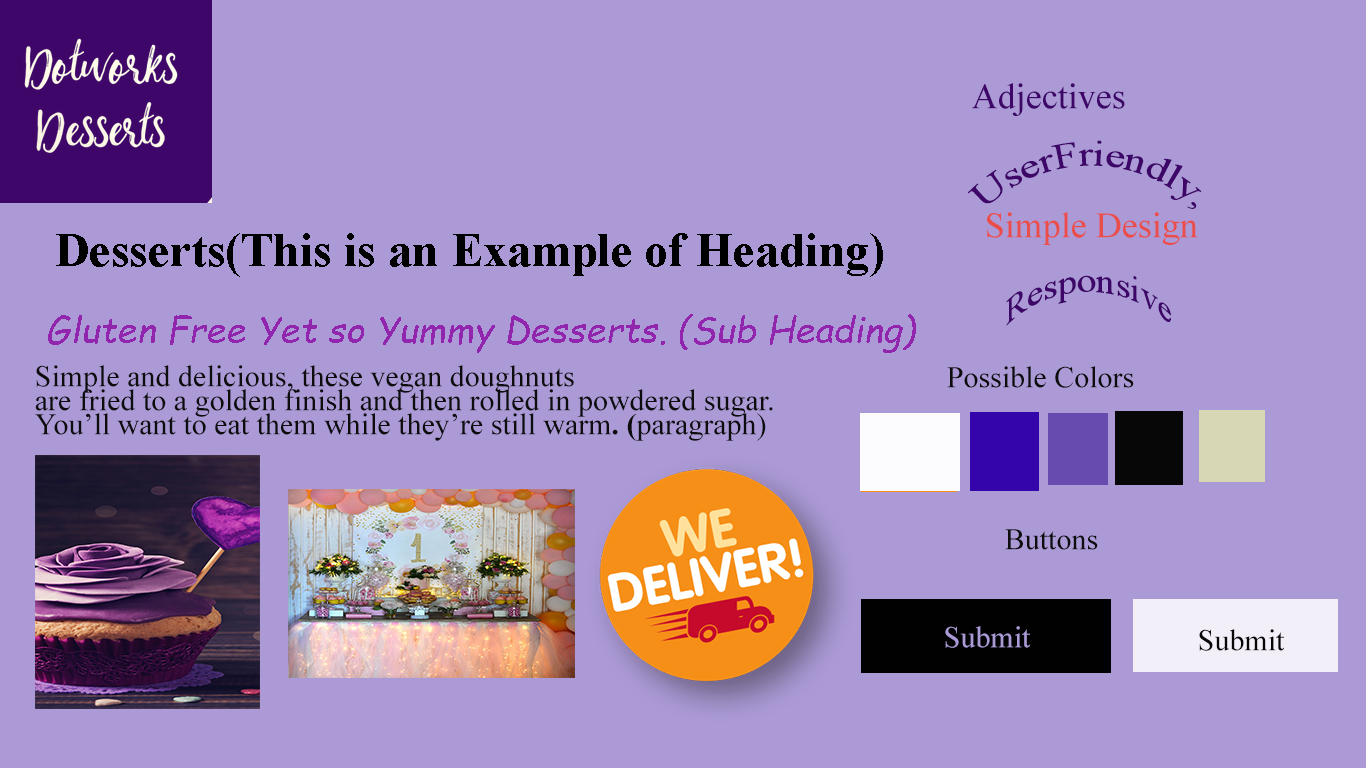
<style>
.page{position:relative;width:1366px;height:768px;background:#ab9ad6}
.page>*{position:absolute;margin:0}
.t1{font:36px "TimesNewRomanPSMT";color:#3e0668}
.t2{font:36px/24px "TimesNewRomanPSMT";color:#3e0668}
.t3{font:36px "TimesNewRomanPSMT";color:#ea4e4a}
.t4{font:48px "TimesNewRomanPS-BoldMT";color:#000000}
.t5{font:36px "ComicSansMS-Italic";color:#9225ad}
.t6{font:30px/24px "TimesNewRomanPSMT";color:#0e0d0e}
.t7{font:30px/24px "TimesNewRomanPS-BoldMT";color:#0e0d0e}
.t8{font:30px "TimesNewRomanPSMT";color:#0e0d0e}
.t9{font:30px "TimesNewRomanPSMT";color:#ab9ad6}
.t10{font:30px "TimesNewRomanPSMT";color:#070707}
</style>
<div class="page">
<p class="t1" style="left:972px;top:83px;width:153px;height:33px">Adjectives</p>
<p class="t2" style="left:967px;top:140px;width:235px;height:69px">UserFriendly,</p>
<p class="t3" style="left:987px;top:212px;width:211px;height:33px">Simple Design</p>
<p class="t4" style="left:56px;top:233px;width:827px;height:44px">Desserts(This is an Example of Heading)</p>
<p class="t1" style="left:1006px;top:275px;width:165px;height:51px">Responsive</p>
<p class="t5" style="left:48px;top:314px;width:868px;height:39px">Gluten Free Yet so Yummy Desserts. (Sub Heading)</p>
<p class="t6" style="left:35px;top:365px;width:738px;height:76px">Simple and delicious, these vegan doughnuts <br>are fried to a golden finish and then rolled in powdered sugar.<br>You’ll want to eat them while they’re still warm<span class="t7">. (</span>paragraph)</p>
<p class="t8" style="left:947px;top:366px;width:187px;height:22px">Possible Colors</p>
<p class="t8" style="left:1005px;top:529px;width:93px;height:21px">Buttons</p>
<p class="t9" style="left:945px;top:626px;width:86px;height:22px">Submit</p>
<p class="t10" style="left:1199px;top:629px;width:86px;height:22px">Submit</p>
</div>
